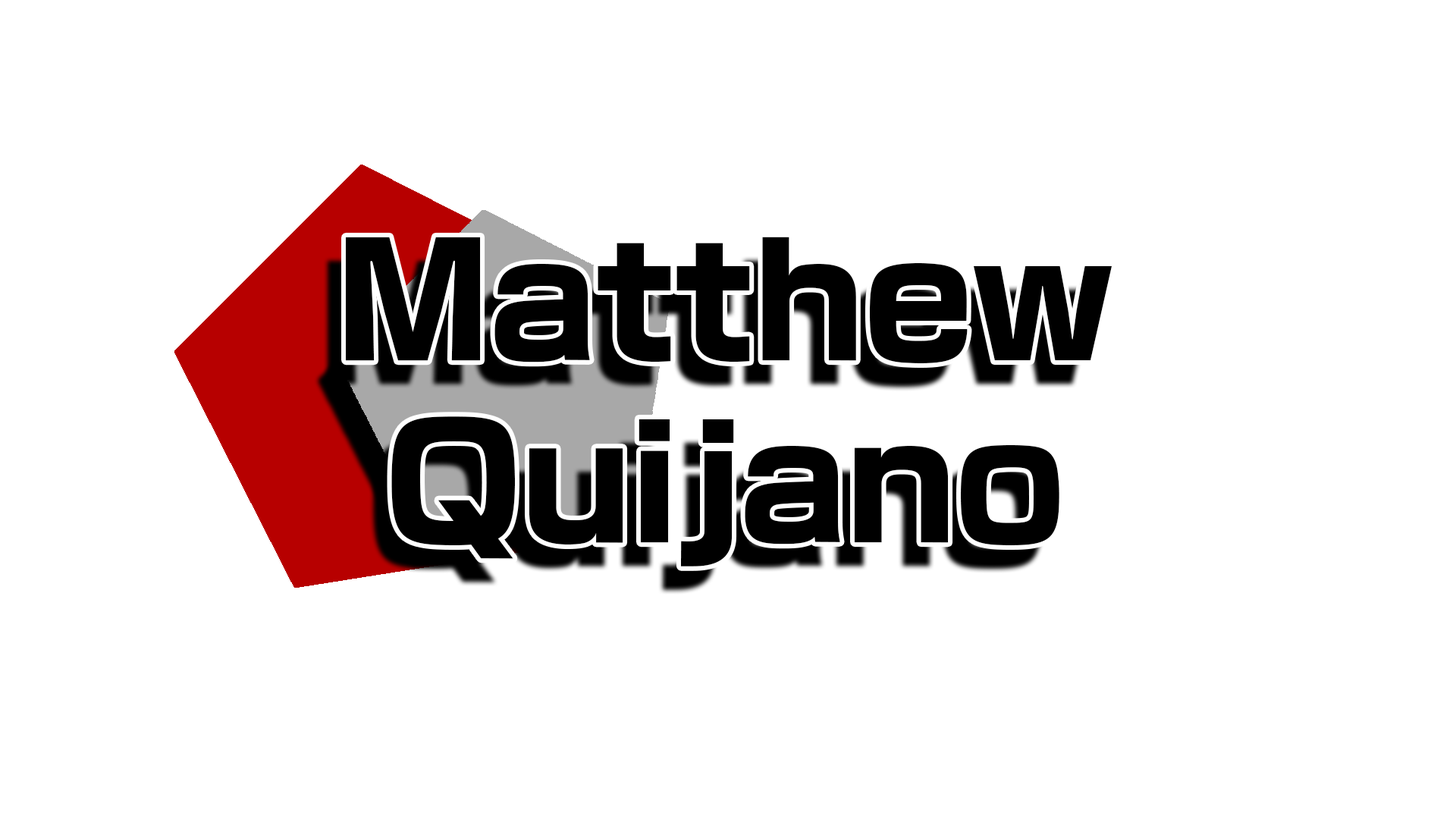
<style>
.page{position:relative;width:1456px;height:819px;background:#ffffff}
.page>*{position:absolute;margin:0}
.t1{font:151.7px "NewRodinProN-EB";color:#000000}
</style>
<div class="page">
<p class="t1" style="left:346px;top:237px;width:766px;height:329px;text-align:center">Matthew<br>Quijano</p>
</div>
